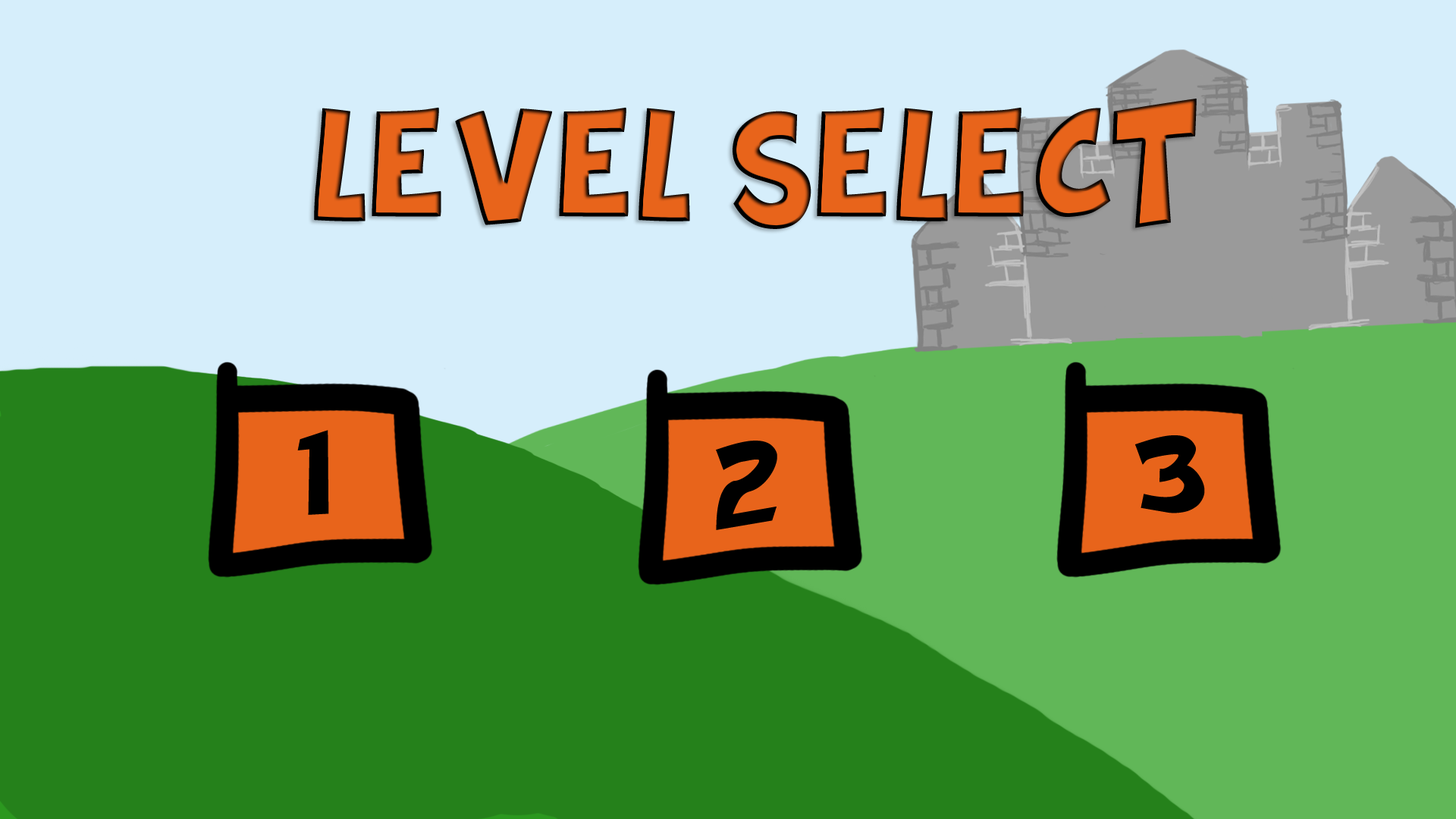
<style>
.page{position:relative;width:1456px;height:819px;background:#d6eefb}
.page>*{position:absolute;margin:0}
.t1{font:91px "Splatch";color:#e8641b}
.t2{font:91px "PokemonSolidNormal";color:#000000}
</style>
<div class="page">
<p class="t1" style="left:314px;top:99px;width:883px;height:130px">LEVEL SELECT</p>
<p class="t2" style="left:297px;top:430px;width:32px;height:85px">1</p>
<p class="t2" style="left:1134px;top:435px;width:71px;height:78px">3</p>
<p class="t2" style="left:716px;top:441px;width:61px;height:89px">2</p>
</div>
